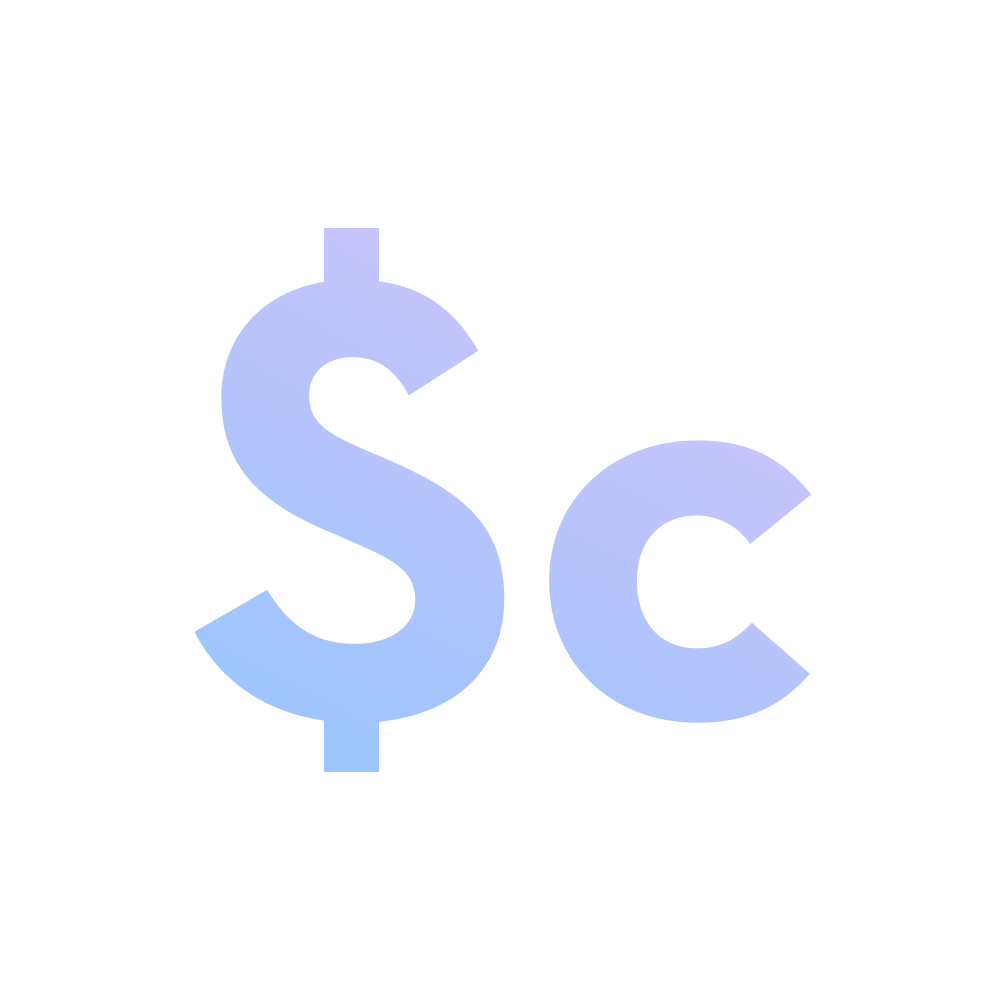
<style>
.page{position:relative;width:1000px;height:1000px;background:#ffffff}
.page>*{position:absolute;margin:0}
.t1{font:635.7px "NeutraText-Bold";letter-spacing:-0.005em;color:#b3c4fc}
</style>
<div class="page">
<p class="t1" style="left:194px;top:279px;width:618px;height:444px">Sc</p>
</div>
